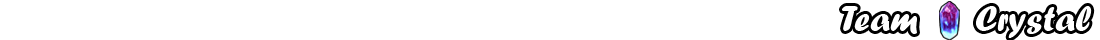
<style>
.page{position:relative;width:1100px;height:40px;background:#ffffff}
.page>*{position:absolute;margin:0}
.t1{font:36px "ForteMT";color:#ffffff}
</style>
<div class="page">
<p class="t1" style="left:842px;top:6px;width:250px;height:32px">Team      Crystal</p>
</div>
